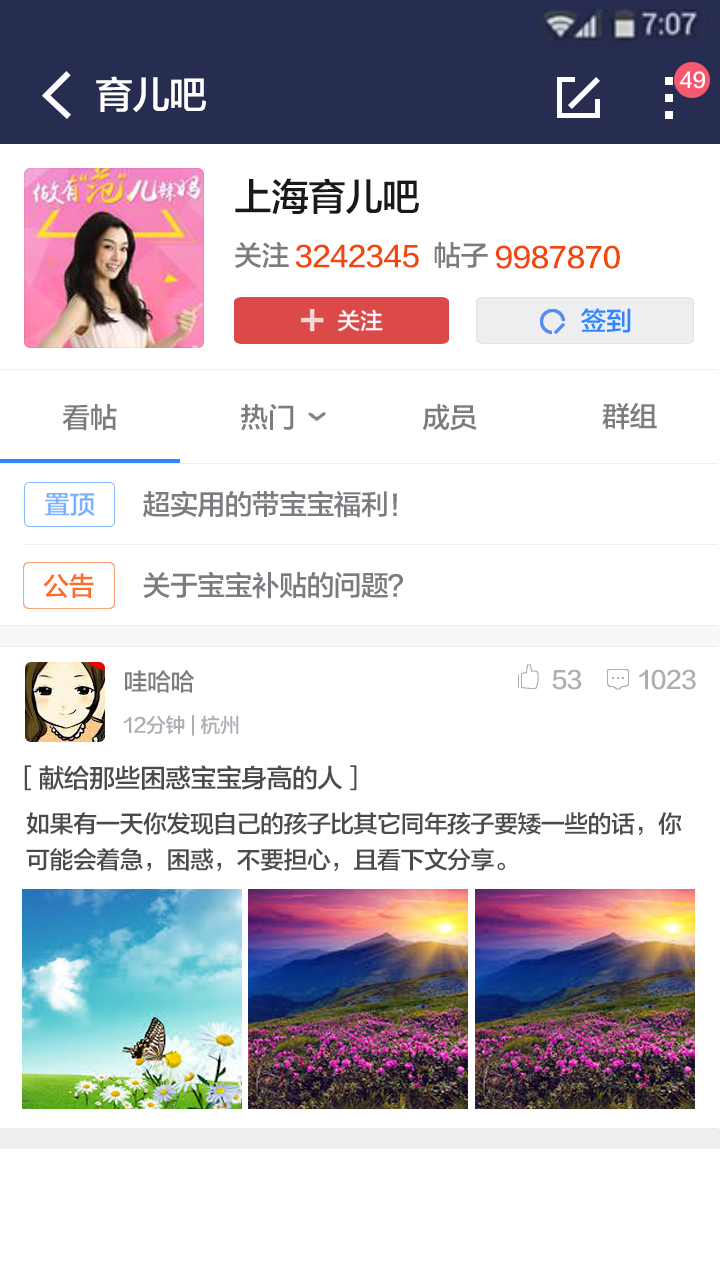
<style>
.page{position:relative;width:720px;height:1280px;background:#ffffff}
.page>*{position:absolute;margin:0}
.t1{font:38px "FZLTZHK--GBK1-0";letter-spacing:-0.025em;color:#ffffff}
.t2{font:38px "FZLTZHK--GBK1-0";letter-spacing:-0.025em;color:#18191a}
.t3{font:28px "FZLTZHK--GBK1-0";letter-spacing:-0.025em;color:#7a7c80}
.t4{font:28px "FZLTZHK--GBK1-0";letter-spacing:-0.025em;color:#f2460c}
.t5{font:26.3px "FZLTZHK--GBK1-0";letter-spacing:-0.025em;color:#fa702a}
.t6{font:24px "FZLTZHK--GBK1-0";letter-spacing:-0.025em;color:#7a7c80}
.t7{font:24px "FZLTZHK--GBK1-0";letter-spacing:-0.025em;color:#abaeb3}
.t8{font:20px "FZLTZHK--GBK1-0";letter-spacing:-0.025em;color:#abaeb3}
.t9{font:26px "FZLTZHK--GBK1-0";letter-spacing:-0.025em;color:#494b4d}
.t10{font:24px/36px "FZLTZHK--GBK1-0";letter-spacing:-0.025em;color:#494b4d}
</style>
<div class="page">
<p class="t1" style="left:96px;top:76px;width:110px;height:36px">育儿吧</p>
<p class="t2" style="left:235px;top:178px;width:184px;height:36px">上海育儿吧</p>
<p class="t3" style="left:235px;top:242px;width:54px;height:27px">关注</p>
<p class="t4" style="left:295px;top:244px;width:124px;height:24px">3242345</p>
<p class="t3" style="left:434px;top:242px;width:54px;height:26px">帖子</p>
<p class="t4" style="left:495px;top:245px;width:125px;height:24px">9987870</p>
<p class="t3" style="left:62px;top:404px;width:55px;height:27px">看帖</p>
<p class="t3" style="left:241px;top:404px;width:53px;height:27px">热门</p>
<p class="t3" style="left:422px;top:404px;width:55px;height:27px">成员</p>
<p class="t3" style="left:602px;top:403px;width:55px;height:27px">群组</p>
<p class="t3" style="left:143px;top:490px;width:254px;height:28px">超实用的带宝宝福利！</p>
<p class="t5" style="left:43px;top:573px;width:51px;height:25px">公告</p>
<p class="t3" style="left:143px;top:572px;width:260px;height:27px">关于宝宝补贴的问题？</p>
<p class="t6" style="left:125px;top:670px;width:69px;height:23px">哇哈哈</p>
<p class="t7" style="left:552px;top:669px;width:30px;height:21px">53</p>
<p class="t7" style="left:639px;top:669px;width:57px;height:21px">1023</p>
<p class="t8" style="left:124px;top:715px;width:115px;height:21px">12分钟 | 杭州</p>
<p class="t9" style="left:24px;top:765px;width:333px;height:26px">［献给那些困惑宝宝身高的人］</p>
<p class="t10" style="left:26px;top:812px;width:656px;height:60px">如果有一天你发现自己的孩子比其它同年孩子要矮一些的话，你<br>可能会着急，困惑，不要担心，且看下文分享。</p>
</div>
